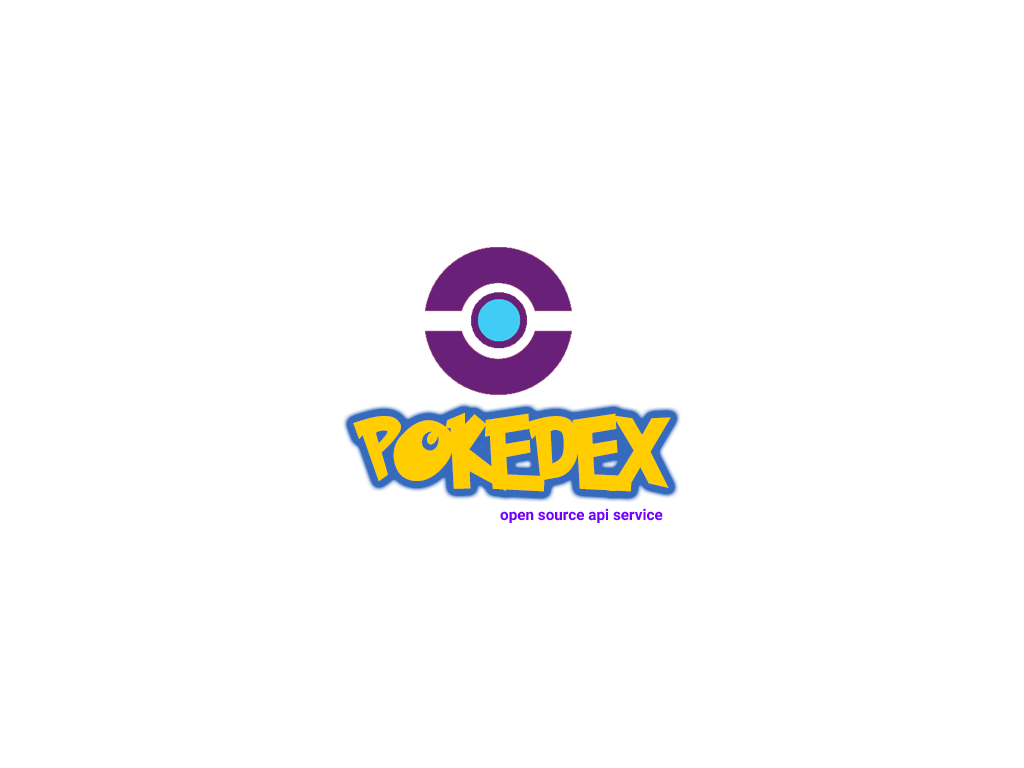
<style>
.page{position:relative;width:1024px;height:768px;background:#ffffff}
.page>*{position:absolute;margin:0}
.t1{font:72px "PokemonSolidNormal";color:#ffcd00}
.t2{font:15.3px "Roboto-Bold";color:#7200ff}
</style>
<div class="page">
<p class="t1" style="left:353px;top:412px;width:318px;height:80px">POKEDEX</p>
<p class="t2" style="left:500px;top:508px;width:163px;height:15px">open source api service</p>
</div>
